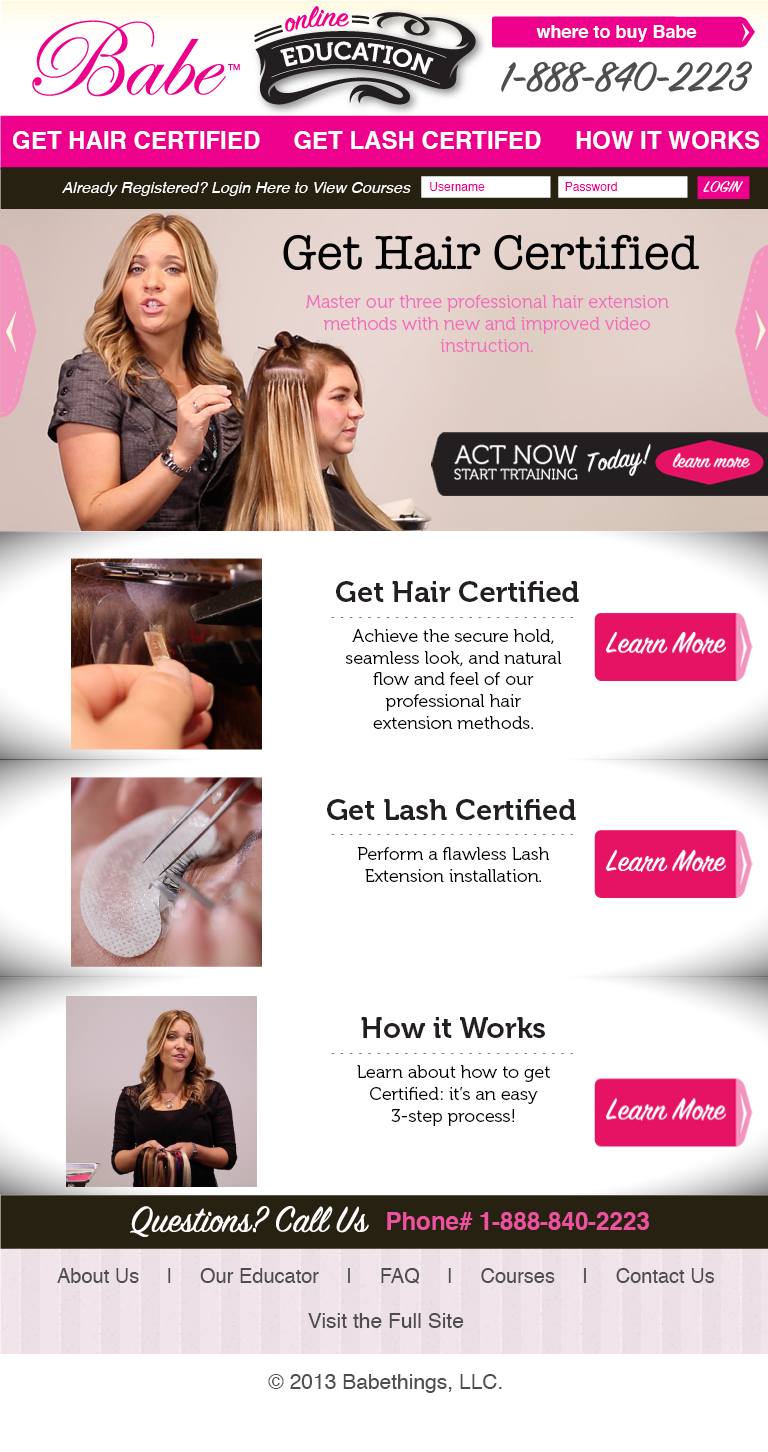
<style>
.page{position:relative;width:768px;height:1452px;background:#ffffff}
.page>*{position:absolute;margin:0}
.t1{font:18px "Helvetica-Bold";color:#ffffff}
.t2{font:24px "Helvetica-Bold";color:#ffffff}
.t3{font:16px "Helvetica-Oblique";color:#ffffff}
.t4{font:12px "Helvetica";color:#ec008c}
.t5{font:18.1px "SignPainterHouseScript";color:#ffffff}
.t6{font:18.1px "Museo-300";color:#f06fbb}
.t7{font:29px "Museo-700";color:#231f20}
.t8{font:18px "Museo-300";color:#000000}
.t9{font:24px "Helvetica-Bold";color:#eb539e}
.t10{font:20px "Helvetica";color:#4e4e50}
.t11{font:21px "Helvetica";color:#4e4e50}
</style>
<div class="page">
<p class="t1" style="left:536px;top:25px;width:161px;height:17px">where to buy Babe</p>
<p class="t2" style="left:13px;top:131px;width:747px;height:18px">GET HAIR CERTIFIED     GET LASH CERTIFED     HOW IT WORKS</p>
<p class="t3" style="left:62px;top:182px;width:349px;height:14px">Already Registered? Login Here to View Courses</p>
<p class="t4" style="left:430px;top:182px;width:55px;height:9px">Username</p>
<p class="t4" style="left:565px;top:182px;width:52px;height:9px">Password</p>
<p class="t5" style="left:703px;top:181px;width:40px;height:11px">LOGIN</p>
<p class="t6" style="left:306px;top:295px;width:363px;height:57px;text-align:center">Master our three professional hair extension methods with new and improved video instruction.</p>
<p class="t7" style="left:336px;top:581px;width:243px;height:21px">Get Hair Certified</p>
<p class="t8" style="left:345px;top:629px;width:217px;height:100px;text-align:center">Achieve the secure hold, seamless look, and natural flow and feel of our professional hair extension methods.</p>
<p class="t7" style="left:327px;top:799px;width:249px;height:21px">Get Lash Certified</p>
<p class="t8" style="left:357px;top:847px;width:193px;height:35px;text-align:center">Perform a flawless Lash Extension installation.</p>
<p class="t7" style="left:361px;top:1017px;width:184px;height:21px">How it Works</p>
<p class="t8" style="left:357px;top:1065px;width:193px;height:61px;text-align:center">Learn about how to get Certified: it’s an easy 3-step process!</p>
<p class="t9" style="left:387px;top:1212px;width:262px;height:18px">Phone# 1-888-840-2223</p>
<p class="t10" style="left:57px;top:1268px;width:657px;height:16px">About Us     |     Our Educator     |     FAQ     |     Courses     |     Contact Us</p>
<p class="t11" style="left:308px;top:1313px;width:156px;height:15px">Visit the Full Site</p>
<p class="t11" style="left:268px;top:1374px;width:234px;height:19px">© 2013 Babethings, LLC.</p>
</div>
